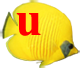
<style>
.page{position:relative;width:80px;height:68px;background:#ffffff}
.page>*{position:absolute;margin:0}
.t1{font:48px "TimesNewRomanPS-BoldMT";color:#ff0000}
</style>
<div class="page">
<p class="t1" style="left:16px;top:13px;width:25px;height:23px">u</p>
</div>
